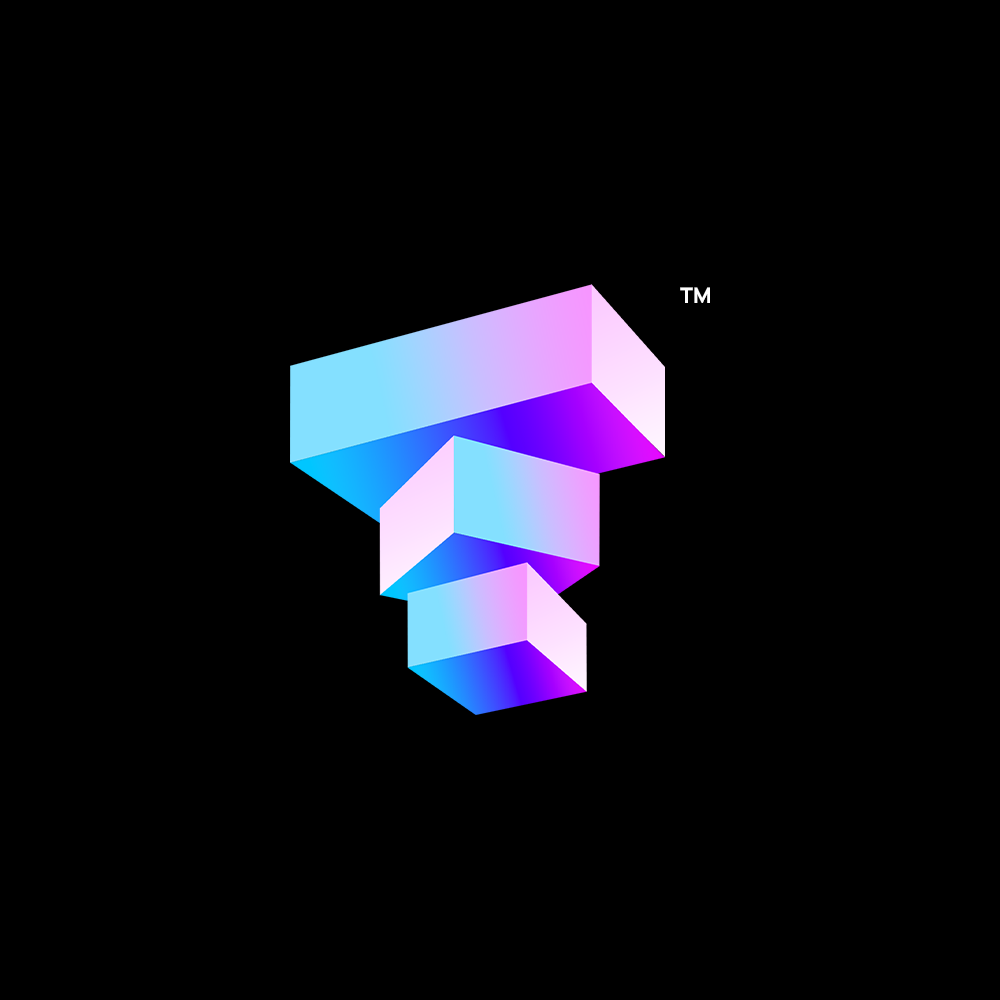
<style>
.page{position:relative;width:1000px;height:1000px;background:#000000}
.page>*{position:absolute;margin:0}
.t1{font:21.4px "Manrope-ExtraBold";letter-spacing:-0.01em;color:#fefefe}
</style>
<div class="page">
<p class="t1" style="left:680px;top:287px;width:30px;height:16px">TM</p>
</div>
